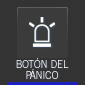
<style>
.page{position:relative;width:85px;height:85px;background:#333333}
.page>*{position:absolute;margin:0}
.t1{font:12px/11px "NewsGotT-Regu";letter-spacing:-0.005em;color:#ffffff}
</style>
<div class="page">
<p class="t1" style="left:16px;top:58px;width:53px;height:21px;text-align:center">BOTÓN DEL<br>PÁNICO</p>
</div>
